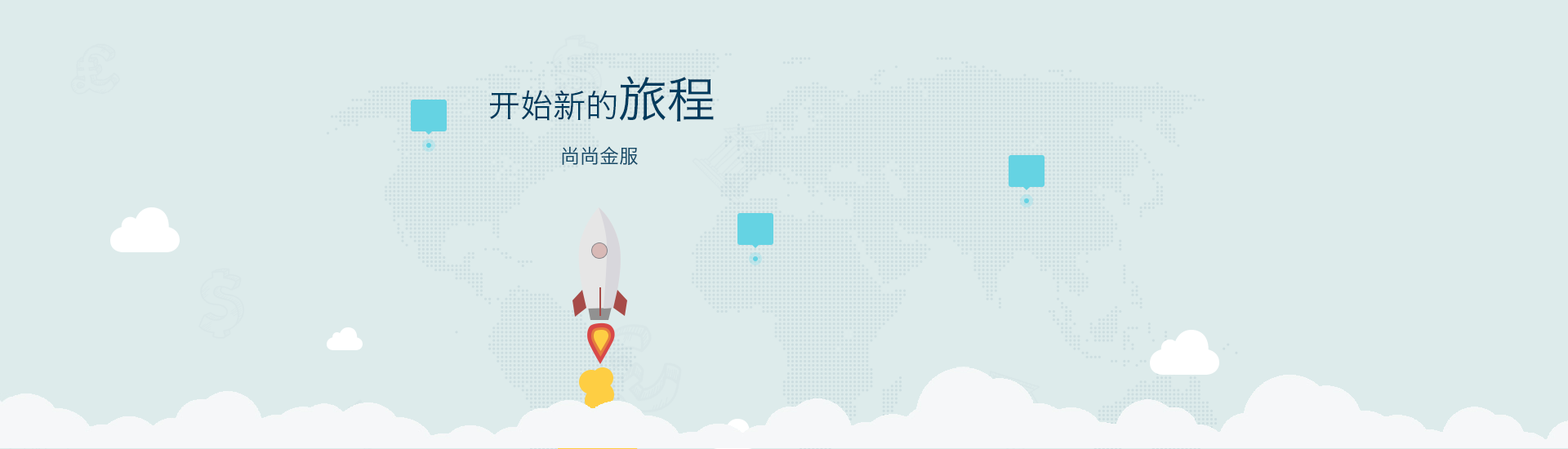
<style>
.page{position:relative;width:1568px;height:449px;background:#ddebeb}
.page>*{position:absolute;margin:0}
.t1{font:32.7px "HiraginoSansGB-W3";color:#003b5d}
.t2{font:49px "HiraginoSansGB-W3";color:#003b5d}
.t3{font:19.6px "HiraginoSansGB-W3";color:#144a68}
</style>
<div class="page">
<p class="t1" style="left:490px;top:76px;width:224px;height:46px">开始新的<span class="t2">旅程</span></p>
<p class="t3" style="left:562px;top:146px;width:76px;height:19px">尚尚金服</p>
</div>
